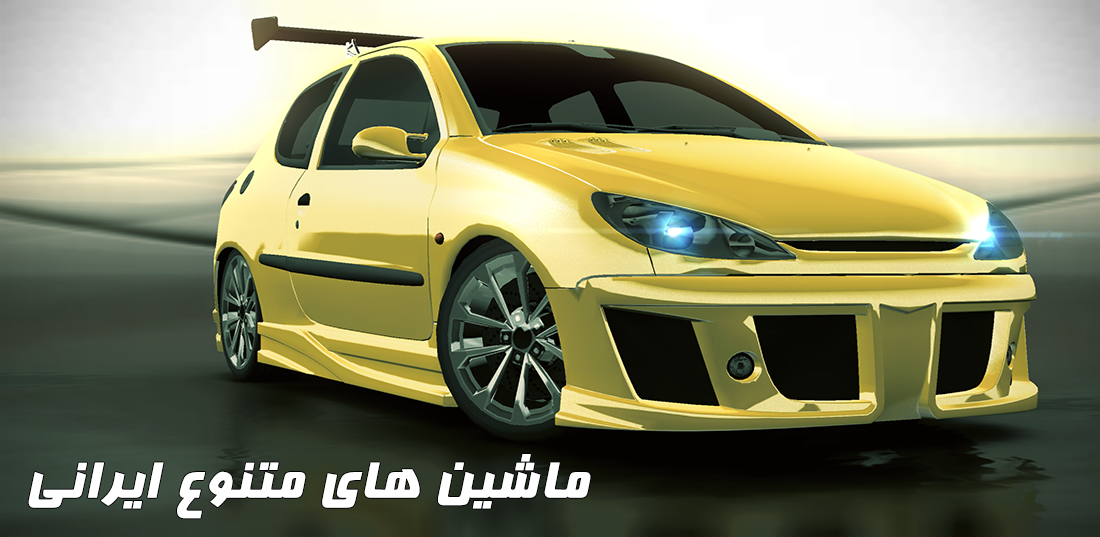
<style>
.page{position:relative;width:1100px;height:537px}
.page>*{position:absolute;margin:0}
.t1{font:60px "Far.Farnaz";color:#ffffff;font-weight:bold}
</style>
<div class="page">
<p class="t1" style="left:28px;top:454px;width:563px;height:65px">ﯽﻧﺍﺮﯾﺍ ﻉﻮﻨﺘﻣ ىﺎﻫ ﻦﯿﺷﺎﻣ</p>
</div>
